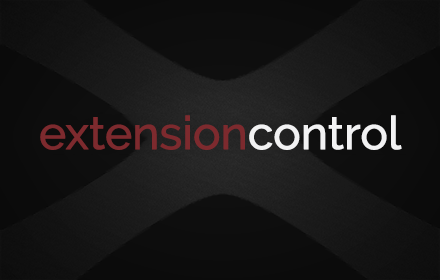
<style>
.page{position:relative;width:440px;height:280px}
.page>*{position:absolute;margin:0}
.t1{font:46px "Raleway-Medium";letter-spacing:-0.025em;color:#7d2a2e;font-weight:bold}
.t2{font:46px "Raleway-Medium";letter-spacing:-0.025em;color:#f2f2f3;font-weight:bold}
</style>
<div class="page">
<p class="t1" style="left:40px;top:115px;width:362px;height:35px">extension<span class="t2">control</span></p>
</div>
